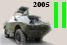
<style>
.page{position:relative;width:67px;height:45px;background:#ded6ce}
.page>*{position:absolute;margin:0}
.t1{font:10.3px "Aparajita-Bold";color:#000000}
</style>
<div class="page">
<p class="t1" style="left:33px;top:2px;width:17px;height:5px">2005</p>
</div>
